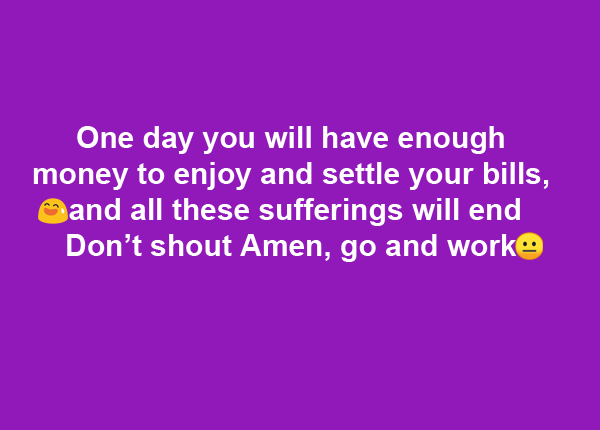
<style>
.page{position:relative;width:600px;height:430px;background:#9118b9}
.page>*{position:absolute;margin:0}
.t1{font:30px "Arial-BoldMT";color:#ffffff}
</style>
<div class="page">
<p class="t1" style="left:33px;top:126px;width:516px;height:136px;text-align:center">One day you will have enough <br>money to enjoy and settle your bills,<br> and all these sufferings will end <br>Don’t shout Amen, go and work</p>
</div>
